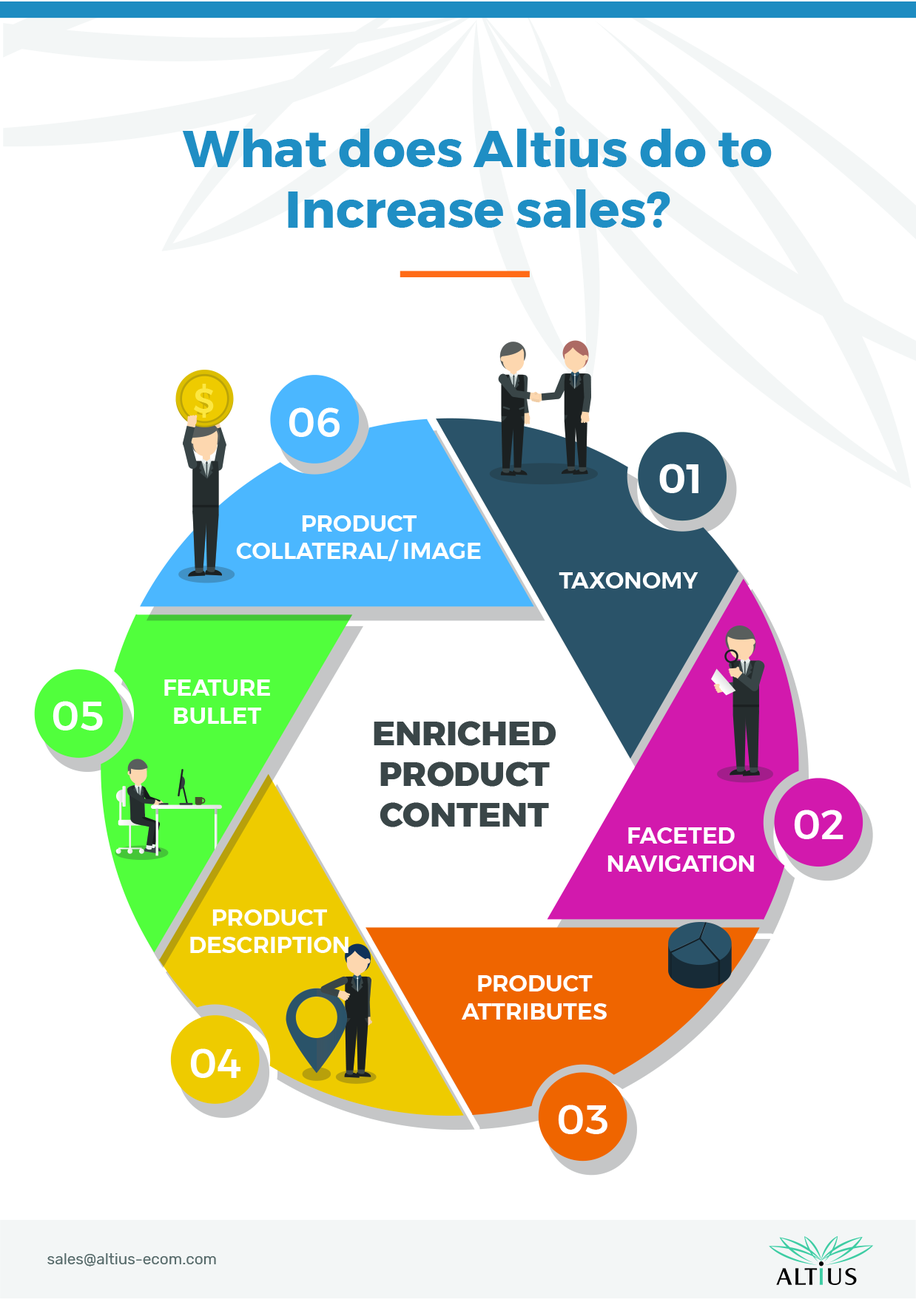
<style>
.page{position:relative;width:916px;height:1302px;background:#ffffff}
.page>*{position:absolute;margin:0}
.t1{font:50.8px "Montserrat-Bold";color:#1f8dc4}
.t2{font:34.4px "Montserrat-Medium";color:#fce741}
.t3{font:34.4px "Bebas"}
.t4{font:40.3px "Montserrat-Medium";color:#ffffff}
.t5{font:40.3px "Montserrat-SemiBold";color:#ffffff}
.t6{font:23.1px "Montserrat-SemiBold";color:#ffffff;text-transform:uppercase}
.t7{font:33.9px "Montserrat-ExtraBold";color:#3a4648;text-transform:uppercase}
.t8{font:15.4px "Rubik-Regular";color:#576a6b}
</style>
<div class="page">
<p class="t1" style="left:182px;top:126px;width:589px;height:102px;text-align:center">What does Altius do to<br>Increase sales?</p>
<p class="t2" style="left:194px;top:384px;width:20px;height:34px">$</p>
<p class="t3" style="left:197px;top:390px;width:14px;height:27px">$</p>
<p class="t4" style="left:288px;top:408px;width:51px;height:29px">06</p>
<p class="t5" style="left:659px;top:464px;width:39px;height:29px">01</p>
<p class="t6" style="left:236px;top:515px;width:245px;height:46px;text-align:center">Product<br>Collateral/ Image</p>
<p class="t6" style="left:558px;top:572px;width:140px;height:17px">Taxonomy</p>
<p class="t6" style="left:164px;top:680px;width:106px;height:44px;text-align:center">feature<br>bullet</p>
<p class="t4" style="left:53px;top:701px;width:50px;height:30px">05</p>
<p class="t7" style="left:373px;top:721px;width:182px;height:107px;text-align:center">Enriched<br>Product<br>Content</p>
<p class="t4" style="left:794px;top:810px;width:49px;height:29px">02</p>
<p class="t6" style="left:607px;top:828px;width:147px;height:44px;text-align:center">Faceted<br>navigation</p>
<p class="t6" style="left:190px;top:910px;width:158px;height:43px;text-align:center">product<br>description</p>
<p class="t6" style="left:461px;top:975px;width:145px;height:45px;text-align:center">product<br>Attributes</p>
<p class="t4" style="left:190px;top:1049px;width:50px;height:29px">04</p>
<p class="t4" style="left:558px;top:1105px;width:49px;height:29px">03</p>
<p class="t8" style="left:47px;top:1254px;width:169px;height:13px">sales@altius-ecom.com</p>
</div>
